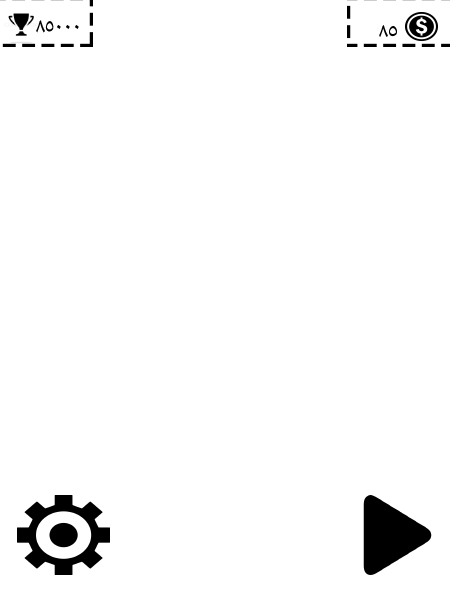
<style>
.page{position:relative;width:450px;height:600px;background:#ffffff}
.page>*{position:absolute;margin:0}
.t1{font:26px "AdobeArabic-Regular";color:#000000}
</style>
<div class="page">
<p class="t1" style="left:36px;top:20px;width:43px;height:13px">85000</p>
<p class="t1" style="left:379px;top:25px;width:18px;height:12px">85</p>
</div>
